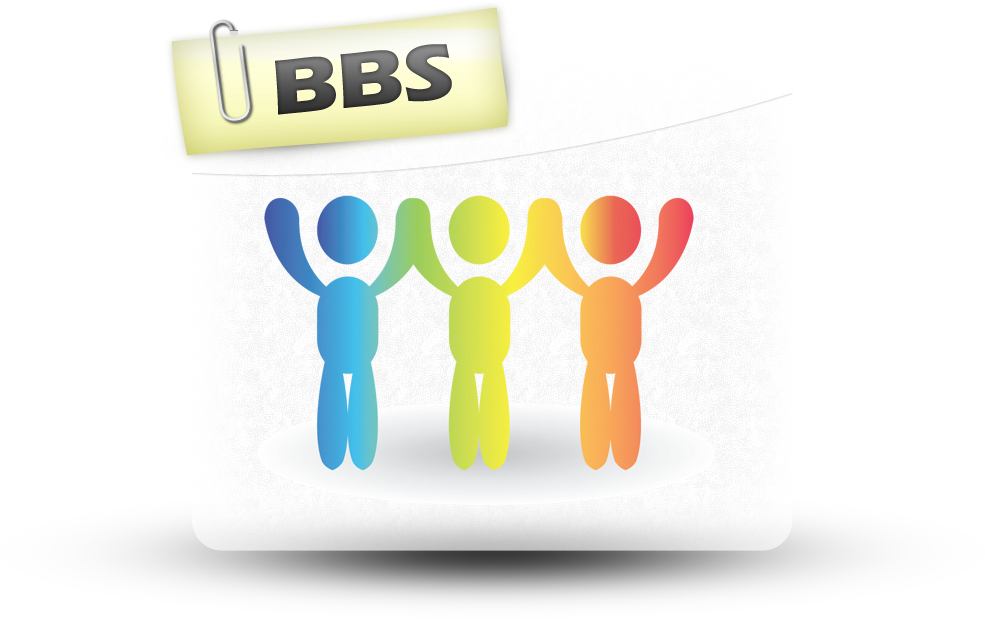
<style>
.page{position:relative;width:985px;height:619px;background:#ffffff}
.page>*{position:absolute;margin:0}
.t1{font:80px "ErasITC-Bold";letter-spacing:-0.05em;font-weight:bold;scale:1.2 1}
</style>
<div class="page">
<p class="t1" style="left:275px;top:44px;width:177px;height:71px;rotate:-6deg">BBS</p>
</div>
